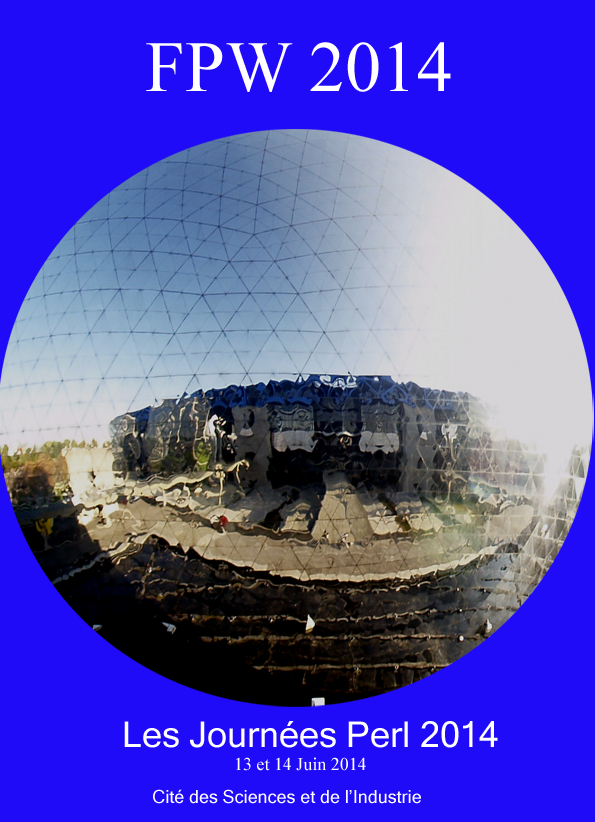
<style>
.page{position:relative;width:595px;height:822px;background:#200bf8}
.page>*{position:absolute;margin:0}
.t1{font:71.7px "TimesNewRomanPSMT";color:#ffffff}
.t2{font:35.9px "MicrosoftSansSerif";color:#ffffff}
.t3{font:17.9px "TimesNewRomanPSMT";color:#ffffff}
.t4{font:17.9px "MicrosoftSansSerif";color:#ffffff}
</style>
<div class="page">
<p class="t1" style="left:146px;top:42px;width:305px;height:50px">FPW 2014</p>
<p class="t2" style="left:124px;top:721px;width:374px;height:27px">Les Journées Perl 2014</p>
<p class="t3" style="left:236px;top:757px;width:130px;height:14px">13 et 14 Juin 2014</p>
<p class="t4" style="left:153px;top:789px;width:268px;height:15px">Cité des Sciences et de l’Industrie</p>
</div>
